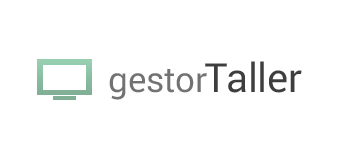
<style>
.page{position:relative;width:350px;height:150px;background:#ffffff}
.page>*{position:absolute;margin:0}
.t1{font:40px "Roboto-Regular";color:#3e3e3e}
.t2{font:35px "Roboto-Regular";color:#727272}
</style>
<div class="page">
<p class="t1" style="left:205px;top:61px;width:97px;height:32px">Taller</p>
<p class="t2" style="left:109px;top:69px;width:98px;height:31px">gestor</p>
</div>
